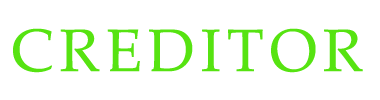
<style>
.page{position:relative;width:380px;height:100px;background:#ffffff}
.page>*{position:absolute;margin:0}
.t1{font:60px "PalatinoLinotype-Roman";letter-spacing:0.1em;color:#56e311;text-transform:uppercase}
</style>
<div class="page">
<p class="t1" style="left:13px;top:28px;width:350px;height:45px">creditor</p>
</div>
